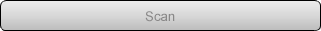
<style>
.page{position:relative;width:321px;height:31px}
.page>*{position:absolute;margin:0}
.t1{font:13.3px "ArialMT";color:#898888}
</style>
<div class="page">
<p class="t1" style="left:145px;top:11px;width:30px;height:11px">Scan</p>
</div>
